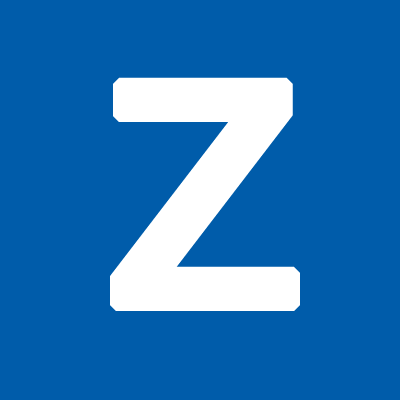
<style>
.page{position:relative;width:400px;height:400px;background:#005caa}
.page>*{position:absolute;margin:0}
.t1{font:450px "Consolas";letter-spacing:-0.05em;color:#ffffff;font-weight:bold}
</style>
<div class="page">
<p class="t1" style="left:110px;top:77px;width:190px;height:234px">z</p>
</div>
